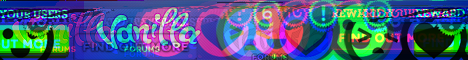
<style>
.page{position:relative;width:468px;height:60px}
.page>*{position:absolute;margin:0}
.t1{font:12px "Archer-BoldLF";letter-spacing:-0.05em;font-weight:bold}
.t2{font:12px "GothamRounded-Bold";font-weight:bold}
.t3{font:8px "GothamRounded-Bold"}
</style>
<div class="page">
<p class="t1" style="left:331px;top:8px;width:121px;height:10px">REWARD YOUR USERS</p>
<p class="t2" style="left:339px;top:33px;width:106px;height:10px">FIND OUT MORE</p>
<p class="t3" style="left:40px;top:46px;width:36px;height:6px">FORUMS</p>
</div>
